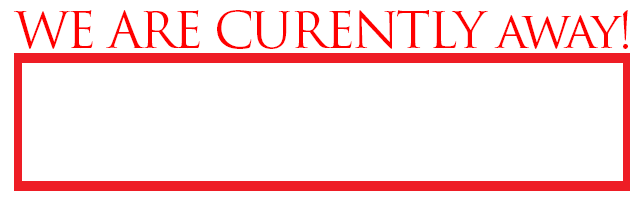
<style>
.page{position:relative;width:640px;height:216px;background:#ffffff}
.page>*{position:absolute;margin:0}
.t1{font:50px "TrajanPro-Regular";letter-spacing:-0.06em;color:#ff0000}
</style>
<div class="page">
<p class="t1" style="left:13px;top:10px;width:615px;height:39px">WE ARE CURENTLY away!</p>
</div>
